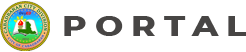
<style>
.page{position:relative;width:246px;height:52px;background:#ffffff}
.page>*{position:absolute;margin:0}
.t1{font:29.5px "Montserrat-ExtraBold";letter-spacing:0.24em;color:#474544;scale:1.13 1}
</style>
<div class="page">
<p class="t1" style="left:64px;top:16px;width:183px;height:20px">PORTAL</p>
</div>
